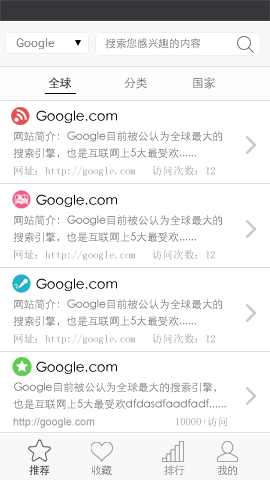
<style>
.page{position:relative;width:270px;height:480px;background:#ffffff}
.page>*{position:absolute;margin:0}
.t1{font:10.7px "STXihei";color:#676767}
.t2{font:12px "STXihei";letter-spacing:-0.04em}
.t3{font:12px "STXihei";letter-spacing:-0.04em;color:#676767}
.t4{font:13.3px "STXihei";color:#000000}
.t5{font:10.7px/16.9px "STXihei";color:#6e6e6e}
.t6{font:10.7px "SimSun";color:#9b9b9b}
.t7{font:10.7px "ArialMT";color:#9b9b9b}
.t8{font:10.7px "STXihei";letter-spacing:-0.04em}
.t9{font:10.7px "STXihei";letter-spacing:-0.04em;color:#676767}
</style>
<div class="page">
<p class="t1" style="left:105px;top:38px;width:96px;height:11px">搜索您感兴趣的内容</p>
<p class="t2" style="left:48px;top:77px;width:23px;height:12px">全球</p>
<p class="t3" style="left:124px;top:77px;width:23px;height:12px">分类</p>
<p class="t3" style="left:193px;top:77px;width:22px;height:12px">国家</p>
<p class="t4" style="left:36px;top:110px;width:81px;height:13px">Google.com</p>
<p class="t5" style="left:13px;top:131px;width:209px;height:27px">网站简介：Google目前被公认为全球最大的<br>搜索引擎，也是互联网上5大最受欢......</p>
<p class="t6" style="left:14px;top:165px;width:201px;height:11px">网址：http://google.com   访问次数：12</p>
<p class="t4" style="left:36px;top:194px;width:81px;height:13px">Google.com</p>
<p class="t5" style="left:13px;top:215px;width:209px;height:27px">网站简介：Google目前被公认为全球最大的<br>搜索引擎，也是互联网上5大最受欢......</p>
<p class="t6" style="left:14px;top:249px;width:201px;height:11px">网址：http://google.com   访问次数：12</p>
<p class="t4" style="left:36px;top:278px;width:81px;height:13px">Google.com</p>
<p class="t5" style="left:13px;top:299px;width:209px;height:27px">网站简介：Google目前被公认为全球最大的<br>搜索引擎，也是互联网上5大最受欢......</p>
<p class="t6" style="left:14px;top:333px;width:201px;height:11px">网址：http://google.com   访问次数：12</p>
<p class="t4" style="left:36px;top:361px;width:81px;height:13px">Google.com</p>
<p class="t5" style="left:13px;top:382px;width:213px;height:27px">Google目前被公认为全球最大的搜索引擎，<br>也是互联网上5大最受欢dfdasdfaadfadf......</p>
<p class="t7" style="left:13px;top:416px;width:214px;height:12px">http://google.com                           <span class="t6">10000+访问</span></p>
<p class="t8" style="left:29px;top:465px;width:21px;height:11px">推荐</p>
<p class="t9" style="left:91px;top:465px;width:21px;height:11px">收藏</p>
<p class="t8" style="left:164px;top:465px;width:21px;height:11px">排行</p>
<p class="t8" style="left:217px;top:465px;width:20px;height:11px">我的</p>
</div>
